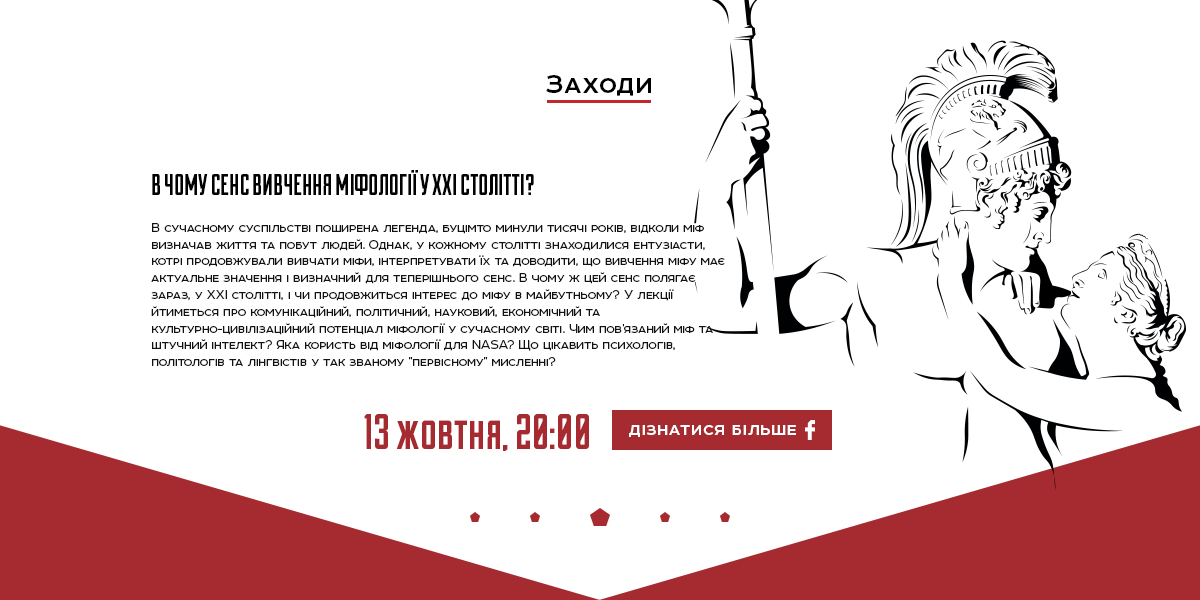
<style>
.page{position:relative;width:1200px;height:600px;background:#ffffff}
.page>*{position:absolute;margin:0}
.t1{font:30px "Room-Bold";letter-spacing:0.03em;color:#000000}
.t2{font:30px "AADuke-Fill";color:#000100}
.t3{font:14px "Room";color:#000000}
.t4{font:50px "AADuke-Fill";letter-spacing:0.01em;color:#a62b30}
.t5{font:20px "Room-Bold";letter-spacing:0.03em;color:#ffffff}
</style>
<div class="page">
<p class="t1" style="left:546px;top:75px;width:105px;height:21px">Заходи</p>
<p class="t2" style="left:152px;top:170px;width:382px;height:25px">В ЧОМУ СЕНС ВИВЧЕННЯ МІФОЛОГІЇ У XXI СТОЛІТТІ?</p>
<p class="t3" style="left:151px;top:223px;width:574px;height:143px;text-align:right">В сучасному суспільстві поширена легенда, буцімто минули тисячі років, відколи міф визначав життя та побут людей. Однак, у кожному столітті знаходилися ентузіасти, котрі продовжували вивчати міфи, інтерпретувати їх та доводити, що вивчення міфу має актуальне значення і визначний для теперішнього сенс. В чому ж цей сенс полягає зараз, у ХХІ столітті, і чи продовжиться інтерес до міфу в майбутньому? У лекції йтиметься про комунікаційний, політичний, науковий, економічний та культурно-цивілізаційний потенціал міфології у сучасному світі. Чим пов'язаний міф та штучний інтелект? Яка користь від міфології для NASA? Що цікавить психологів, політологів та лінгвістів у так званому "первісному" мисленні?</p>
<p class="t4" style="left:364px;top:414px;width:225px;height:37px">13 жовтня, 20:00</p>
<p class="t5" style="left:629px;top:425px;width:167px;height:12px">дізнатися більше</p>
</div>
